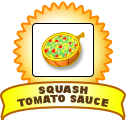
<style>
.page{position:relative;width:126px;height:120px;background:#ffffff}
.page>*{position:absolute;margin:0}
.t1{font:9.4px/9.4px "Arial-Black";letter-spacing:0.045em;color:#5b3714;text-transform:uppercase}
</style>
<div class="page">
<p class="t1" style="left:17px;top:85px;width:92px;height:22px;text-align:center">squash<br>tomato sauce</p>
</div>
